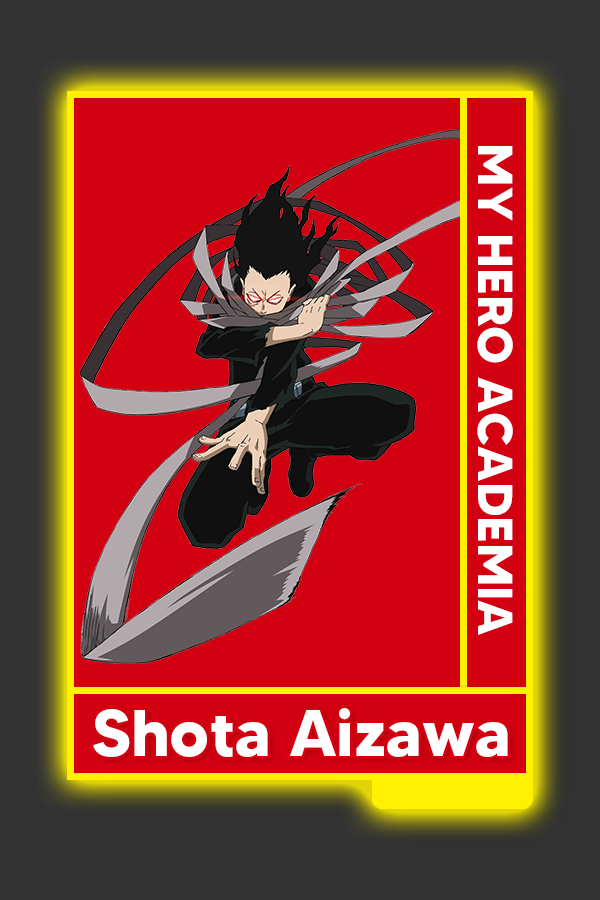
<style>
.page{position:relative;width:600px;height:900px;background:#d20010}
.page>*{position:absolute;margin:0}
.t1{font:48.8px "MADETOMMY-Bold";color:#ffffff}
.t2{font:65.2px "MADETOMMY-Bold";color:#ffffff}
</style>
<div class="page">
<p class="t1" style="left:477px;top:146px;width:36px;height:489px;rotate:90deg">MY HERO ACADEMIA</p>
<p class="t2" style="left:93px;top:708px;width:415px;height:49px">Shota Aizawa</p>
</div>
